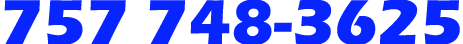
<style>
.page{position:relative;width:463px;height:44px;background:#0825ff}
.page>*{position:absolute;margin:0}
.t1{font:65.9px "ErasITC-Bold";color:#0825ff}
</style>
<div class="page">
<p class="t1" style="left:4px;top:0px;width:456px;height:46px">757 748-3625</p>
</div>
